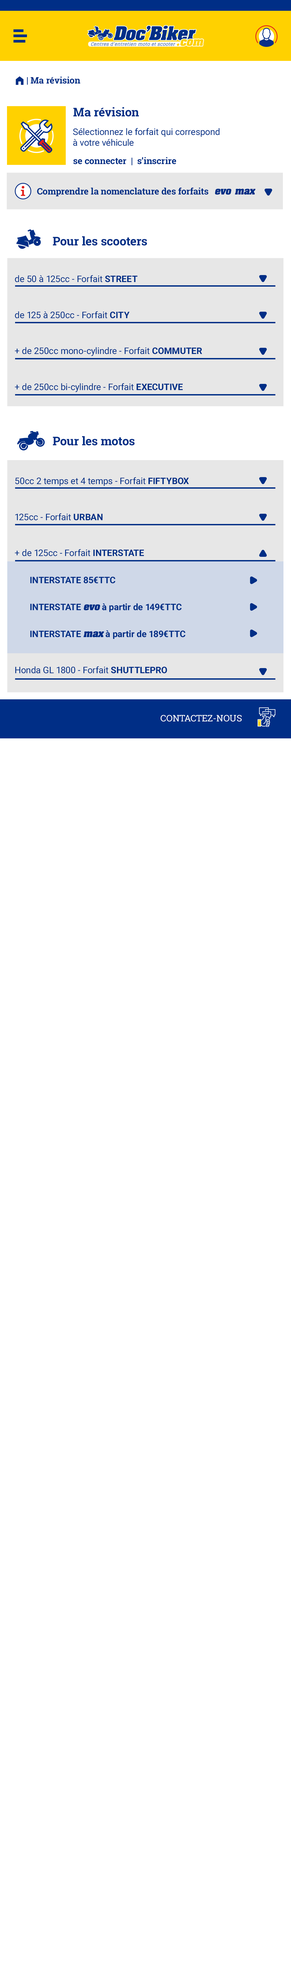
<style>
.page{position:relative;width:291px;height:1987px;background:#ffffff}
.page>*{position:absolute;margin:0}
.t1{font:9px "RobotoSlab-Bold";color:#002e86}
.t2{font:9px "FoundationIconsGeneral-Reg";color:#002e86}
.t3{font:12px "RobotoSlab-Bold";color:#002e86}
.t4{font:9px "Roboto-Regular";color:#002e86}
.t5{font:9px "Aachen-Bold";color:#002e86;font-style:italic}
.t6{font:9px/36px "Roboto-Regular";color:#002e86}
.t7{font:9px/36px "Roboto-Bold";color:#002e86}
.t8{font:9px/27px "Roboto-Bold";color:#002e86;text-transform:uppercase}
.t9{font:9px/27px "Aachen-Bold";color:#002e86;font-style:italic}
.t10{font:9px/27px "Roboto-Bold";color:#002e86}
.t11{font:9px "RobotoSlab-Regular";color:#ffffff;text-transform:uppercase}
</style>
<div class="page">
<p class="t1" style="left:16px;top:76px;width:64px;height:9px"><span class="t2">m </span>| Ma révision</p>
<p class="t3" style="left:73px;top:107px;width:66px;height:10px">Ma révision</p>
<p class="t4" style="left:73px;top:128px;width:147px;height:18px">Sélectionnez le forfait qui correspond <br>à votre véhicule</p>
<p class="t1" style="left:73px;top:157px;width:103px;height:8px">se connecter  |  s’inscrire</p>
<p class="t1" style="left:37px;top:187px;width:171px;height:9px">Comprendre la nomenclature des forfaits</p>
<p class="t5" style="left:215px;top:189px;width:16px;height:6px">evo</p>
<p class="t5" style="left:235px;top:189px;width:20px;height:6px">max</p>
<p class="t3" style="left:53px;top:236px;width:94px;height:10px">Pour les scooters</p>
<p class="t6" style="left:15px;top:275px;width:187px;height:117px">de 50 à 125cc - Forfait <span class="t7">STREET<br></span>de 125 à 250cc - Forfait <span class="t7">CITY<br></span>+ de 250cc mono-cylindre - Forfait <span class="t7">COMMUTER<br></span>+ de 250cc bi-cylindre - Forfait <span class="t7">EXECUTIVE</span></p>
<p class="t3" style="left:53px;top:436px;width:82px;height:9px">Pour les motos</p>
<p class="t6" style="left:15px;top:477px;width:174px;height:196px">50cc 2 temps et 4 temps - Forfait <span class="t7">FIFTYBOX<br></span>125cc - Forfait <span class="t7">URBAN<br></span>+ de 125cc - Forfait <span class="t7">INTERSTATE<br></span><span class="t8">interstate 85€TTC <br>interstate </span><span class="t9">evo</span><span class="t10"> à partir de </span><span class="t8">149€TTC <br>interstate </span><span class="t9">max</span><span class="t10"> à partir de </span><span class="t8">189€TTC <br></span>Honda GL 1800 - Forfait <span class="t7">SHUTTLEPRO</span></p>
<p class="t11" style="left:161px;top:715px;width:81px;height:7px">contactez-nous</p>
</div>
